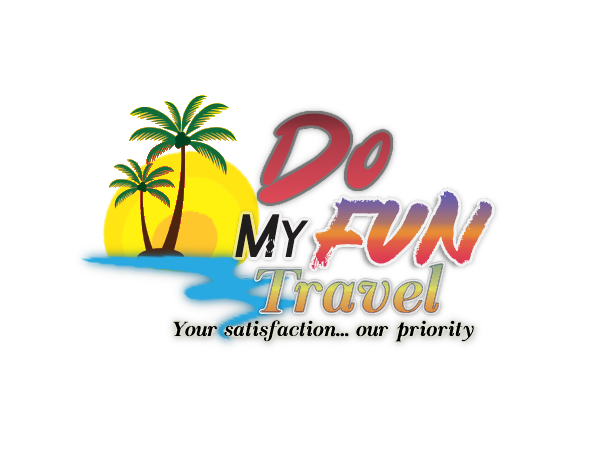
<style>
.page{position:relative;width:589px;height:464px;background:#ffffff}
.page>*{position:absolute;margin:0}
.t1{font:118px "Tuwir";font-style:italic}
.t2{font:92px "Antihero";font-style:italic}
.t3{font:62px "Tetra-Regular";color:#1f1d1d;font-weight:bold;font-style:italic}
.t4{font:53px "Tetra-Regular";color:#1f1d1d;font-weight:bold;font-style:italic}
.t5{font:63px "ChapazaItalic-Italic";font-weight:bold}
.t6{font:21px "ChapazaItalic-Italic";color:#000000;font-weight:bold}
</style>
<div class="page">
<p class="t1" style="left:258px;top:112px;width:133px;height:92px">Do</p>
<p class="t2" style="left:311px;top:190px;width:182px;height:81px">Fun</p>
<p class="t3" style="left:235px;top:214px;width:74px;height:43px">M<span class="t4">y</span></p>
<p class="t5" style="left:255px;top:263px;width:189px;height:50px">Travel</p>
<p class="t5" style="left:255px;top:263px;width:189px;height:50px">Travel</p>
<p class="t6" style="left:173px;top:320px;width:301px;height:22px">Your satisfaction... our priority</p>
</div>
